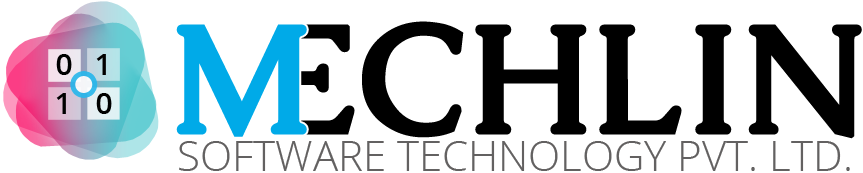
<style>
.page{position:relative;width:863px;height:173px;background:#ffffff}
.page>*{position:absolute;margin:0}
.t1{font:150px "Caudex-Bold";color:#00aae8;font-weight:bold}
.t2{font:30px "OpenSans-SemiBold";color:#000000}
.t3{font:42.1px "OpenSans-Light";color:#636161}
</style>
<div class="page">
<p class="t1" style="left:176px;top:24px;width:131px;height:113px">M</p>
<p class="t2" style="left:56px;top:54px;width:16px;height:21px">0</p>
<p class="t2" style="left:96px;top:54px;width:10px;height:21px">1</p>
<p class="t2" style="left:56px;top:93px;width:10px;height:21px">1</p>
<p class="t2" style="left:96px;top:93px;width:16px;height:21px">0</p>
<p class="t3" style="left:179px;top:141px;width:671px;height:30px">SOFTWARE TECHNOLOGY PVT. LTD.</p>
</div>
